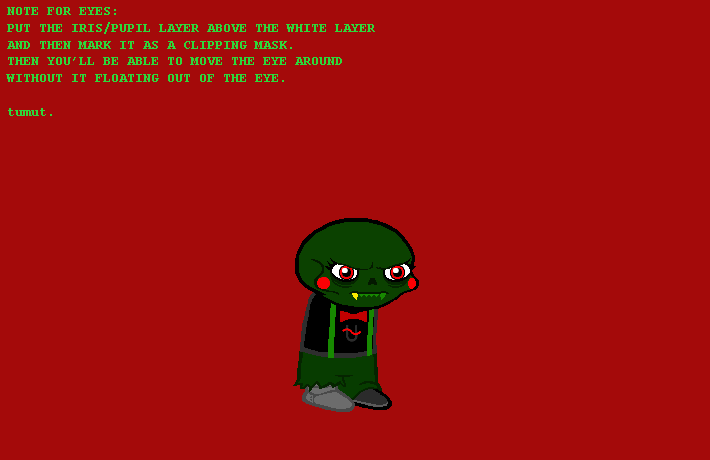
<style>
.page{position:relative;width:710px;height:460px;background:#a40a0a}
.page>*{position:absolute;margin:0}
.t1{font:14px "CourierNewPS-BoldMT";color:#2ed73a}
</style>
<div class="page">
<p class="t1" style="left:6px;top:7px;width:369px;height:109px">NOTE FOR EYES:<br>PUT THE IRIS/PUPIL LAYER ABOVE THE WHITE LAYER<br>AND THEN MARK IT AS A CLIPPING MASK.<br>THEN YOU’LL BE ABLE TO MOVE THE EYE AROUND<br>WITHOUT IT FLOATING OUT OF THE EYE.<br><br>tumut.</p>
</div>
